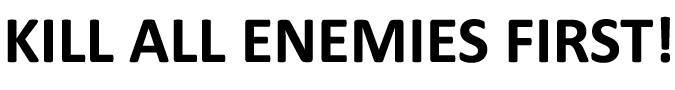
<style>
.page{position:relative;width:675px;height:90px;background:#ffffff}
.page>*{position:absolute;margin:0}
.t1{font:66.7px "Calibri-Bold";color:#000000}
</style>
<div class="page">
<p class="t1" style="left:7px;top:16px;width:663px;height:47px">KILL ALL ENEMIES FIRST!</p>
</div>
